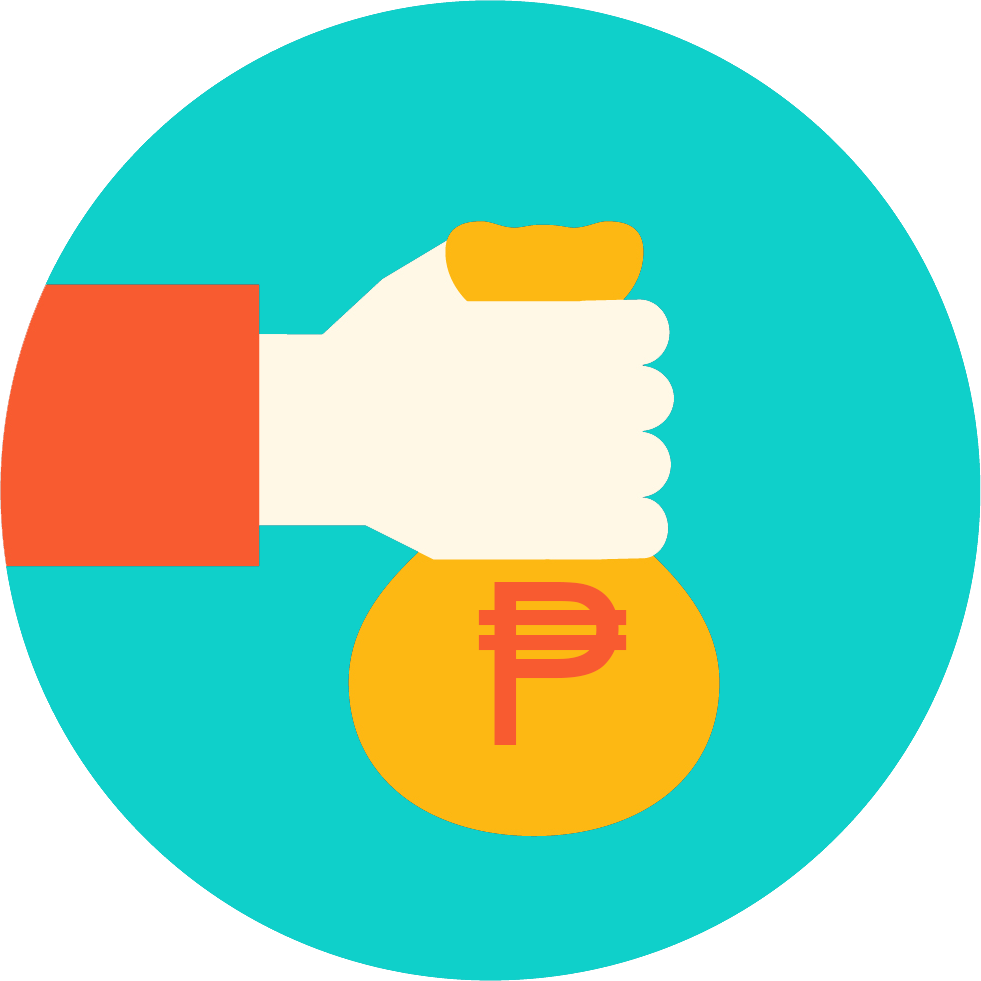
<style>
.page{position:relative;width:981px;height:981px;background:#0fd0ca}
.page>*{position:absolute;margin:0}
.t1{font:227px "ArialMT";color:#f85b30}
</style>
<div class="page">
<p class="t1" style="left:478px;top:582px;width:149px;height:163px">₱</p>
</div>
